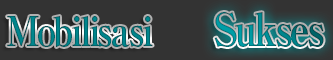
<style>
.page{position:relative;width:333px;height:60px;background:#333333}
.page>*{position:absolute;margin:0}
.t1{font:40px "RyuminPro-ExBold";letter-spacing:-0.08em;color:#00757b;scale:0.9 1}
.t2{font:45px "RyuminPro-ExBold";letter-spacing:-0.08em;scale:0.9 1}
</style>
<div class="page">
<p class="t1" style="left:7px;top:16px;width:146px;height:31px">Mobilisasi</p>
<p class="t2" style="left:214px;top:12px;width:110px;height:35px">Sukses</p>
</div>
